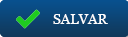
<style>
.page{position:relative;width:128px;height:37px}
.page>*{position:absolute;margin:0}
.t1{font:14px "Georgia";color:#ffffff}
</style>
<div class="page">
<p class="t1" style="left:53px;top:14px;width:55px;height:10px">SALVAR</p>
</div>
